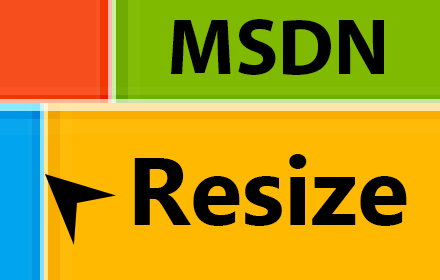
<style>
.page{position:relative;width:440px;height:280px;background:#ffb900}
.page>*{position:absolute;margin:0}
.t1{font:80px "MyriadPro-Bold";color:#000000}
.t2{font:64px "MyriadPro-Bold";color:#000000}
.t3{font:96px "MicrosoftNewTaiLue-Bold";color:#000000}
</style>
<div class="page">
<p class="t1" style="left:171px;top:19px;width:213px;height:56px"><span class="t2"> </span>MSDN</p>
<p class="t3" style="left:134px;top:154px;width:273px;height:72px">Resize</p>
</div>
